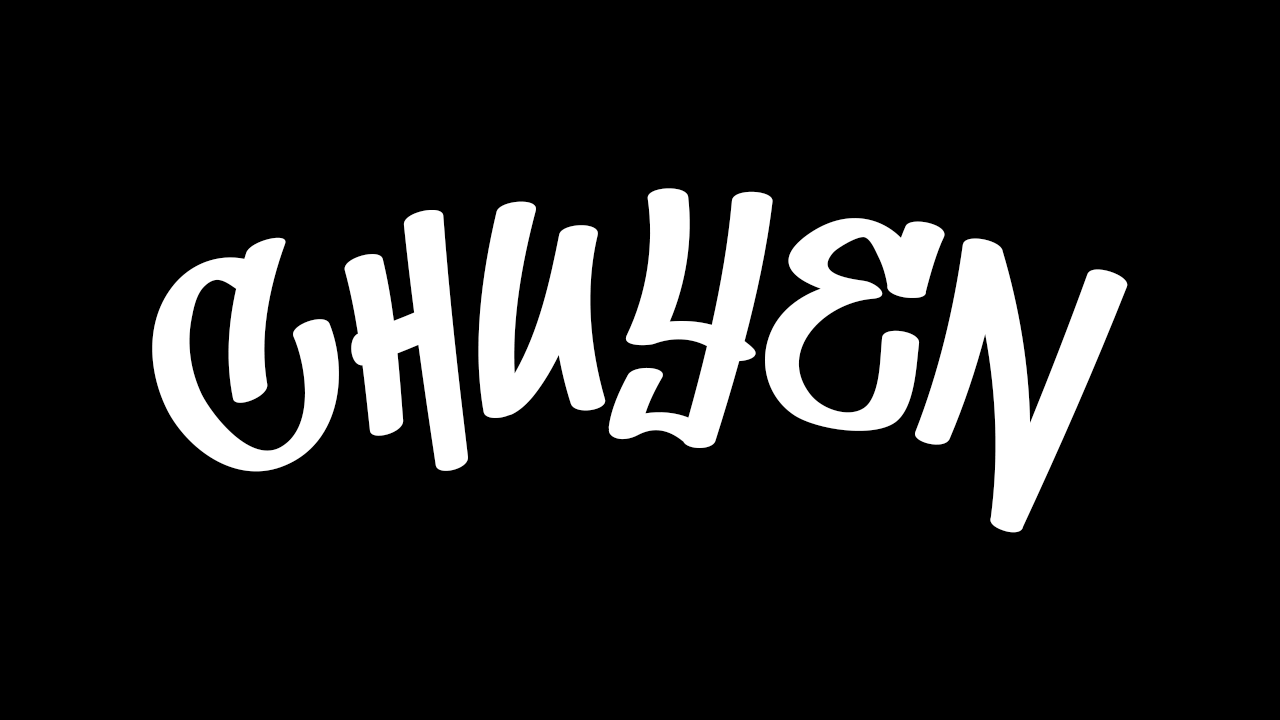
<style>
.page{position:relative;width:1280px;height:720px;background:#000000}
.page>*{position:absolute;margin:0}
.t1{font:300.5px "DonGraffitiRegular";letter-spacing:0.05em;color:#ffffff}
</style>
<div class="page">
<p class="t1" style="left:152px;top:188px;width:976px;height:345px">chuyen</p>
</div>
